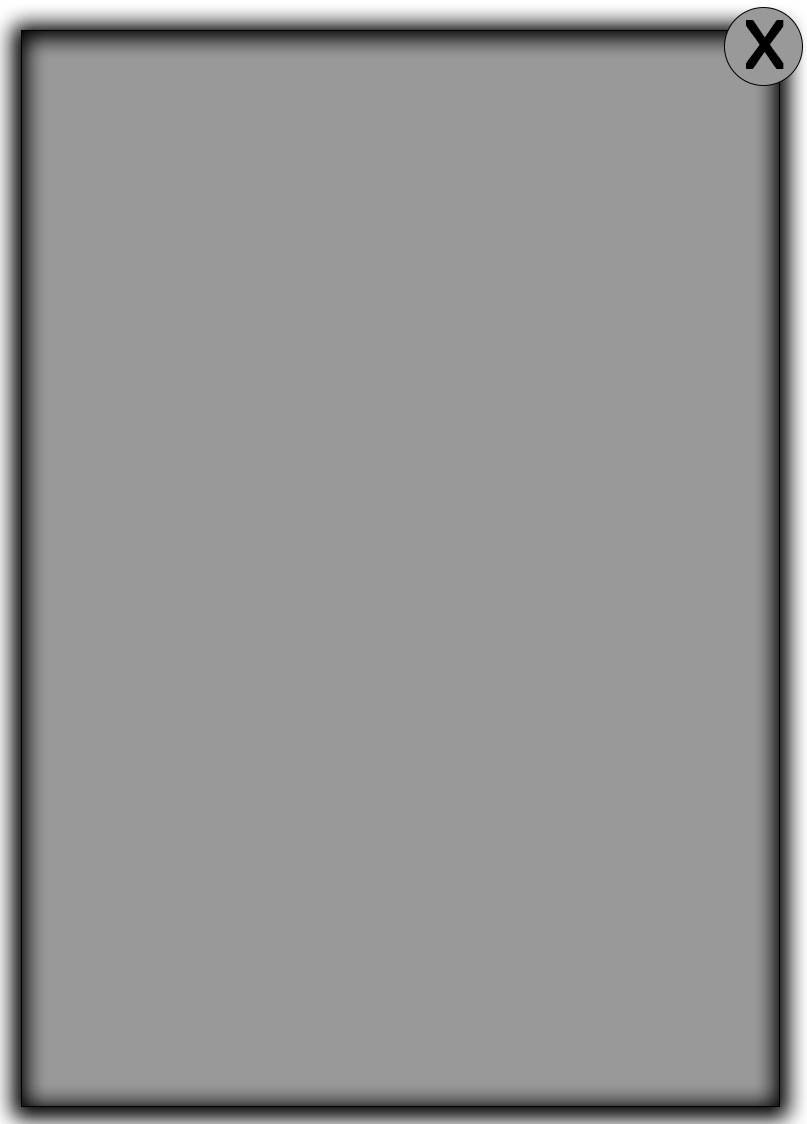
<style>
.page{position:relative;width:807px;height:1124px;background:#999999}
.page>*{position:absolute;margin:0}
.t1{font:72px "BerlinSansFB-Reg";color:#000000}
</style>
<div class="page">
<p class="t1" style="left:746px;top:20px;width:38px;height:49px">X</p>
</div>
